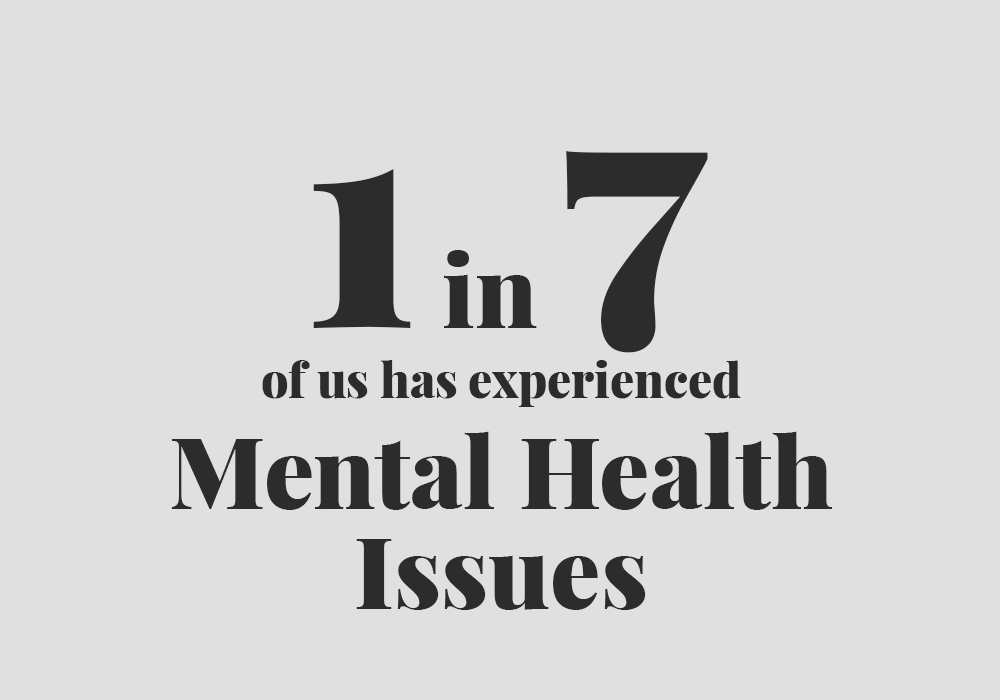
<style>
.page{position:relative;width:1000px;height:700px;background:#e0e0e0}
.page>*{position:absolute;margin:0}
.t1{font:100px "PlayfairDisplay-Black";color:#2c2c2c}
.t2{font:300px "PlayfairDisplay-Black";color:#2c2c2c}
.t3{font:48px "PlayfairDisplay-Black";color:#2c2c2c}
.t4{font:100px/100px "PlayfairDisplay-Black";color:#2c2c2c}
</style>
<div class="page">
<p class="t1" style="left:313px;top:151px;width:395px;height:202px"><span class="t2">1</span> in <span class="t2">7</span></p>
<p class="t3" style="left:262px;top:360px;width:479px;height:47px">of us has experienced</p>
<p class="t4" style="left:171px;top:431px;width:661px;height:179px;text-align:center">Mental Health<br>Issues</p>
</div>
